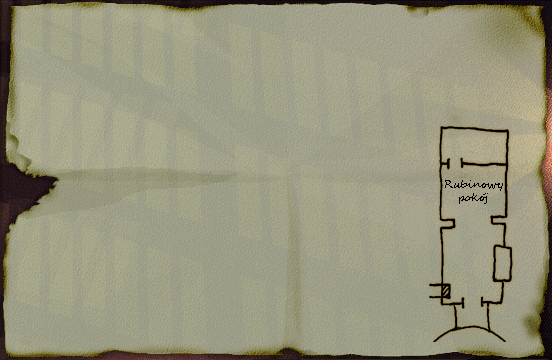
<style>
.page{position:relative;width:552px;height:360px;background:#a5a58c}
.page>*{position:absolute;margin:0}
.t1{font:11px "SegoeScript";color:#000000}
</style>
<div class="page">
<p class="t1" style="left:445px;top:180px;width:58px;height:24px;text-align:center">Rubinowy<br>pokój</p>
</div>
